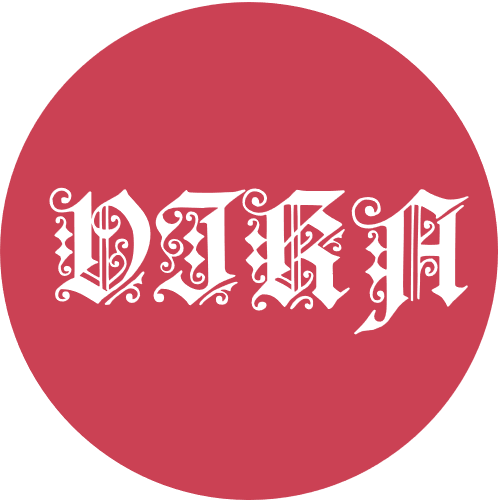
<style>
.page{position:relative;width:500px;height:500px;background:#cb4154}
.page>*{position:absolute;margin:0}
.t1{font:150px "Dearest";color:#ffffff}
</style>
<div class="page">
<p class="t1" style="left:49px;top:187px;width:420px;height:148px">VIKA</p>
</div>
